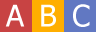
<style>
.page{position:relative;width:96px;height:32px;background:#6178c2}
.page>*{position:absolute;margin:0}
.t1{font:30px "Tahoma";color:#ffffff}
</style>
<div class="page">
<p class="t1" style="left:5px;top:4px;width:20px;height:23px">A</p>
<p class="t1" style="left:41px;top:4px;width:15px;height:23px">B</p>
<p class="t1" style="left:73px;top:4px;width:17px;height:23px">C</p>
</div>
